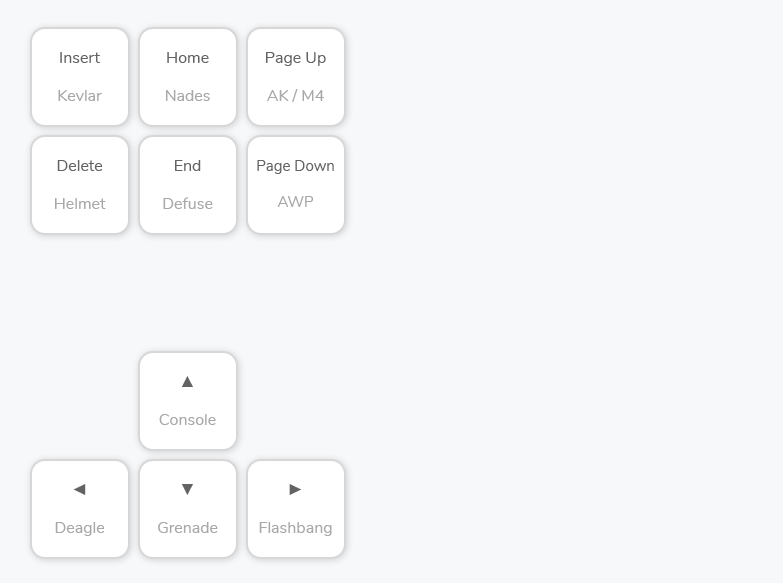
<style>
.page{position:relative;width:783px;height:583px;background:#f6f8fa}
.page>*{position:absolute;margin:0}
.t1{font:16px "Nunito-Regular";color:#636363}
.t2{font:16px "Nunito-Regular";color:#a8a8a8}
.t3{font:15px "Nunito-Regular";color:#636363}
.t4{font:15px "Nunito-Regular";color:#a8a8a8}
.t5{font:16px "TimesNewRomanPSMT";color:#636363}
</style>
<div class="page">
<p class="t1" style="left:58px;top:52px;width:44px;height:49px;text-align:center">Insert<br><br><span class="t2">Kevlar</span></p>
<p class="t2" style="left:166px;top:52px;width:44px;height:49px;text-align:center"><span class="t1">Home<br><br></span>Nades</p>
<p class="t1" style="left:266px;top:52px;width:60px;height:50px;text-align:center">Page Up<br><br><span class="t2">AK / M4</span></p>
<p class="t1" style="left:55px;top:160px;width:51px;height:49px;text-align:center">Delete<br><br><span class="t2">Helmet</span></p>
<p class="t2" style="left:163px;top:160px;width:50px;height:49px;text-align:center"><span class="t1">End<br><br></span>Defuse</p>
<p class="t3" style="left:257px;top:160px;width:77px;height:47px;text-align:center">Page Down<br><br><span class="t4">AWP</span></p>
<p class="t2" style="left:159px;top:376px;width:57px;height:49px;text-align:center"><span class="t5">▲<br><br></span>Console</p>
<p class="t2" style="left:55px;top:484px;width:50px;height:52px;text-align:center"><span class="t5">◄<br><br></span>Deagle</p>
<p class="t2" style="left:158px;top:484px;width:60px;height:49px;text-align:center"><span class="t5">▼<br><br></span>Grenade</p>
<p class="t2" style="left:259px;top:484px;width:73px;height:52px;text-align:center"><span class="t5">►<br><br></span>Flashbang</p>
</div>
